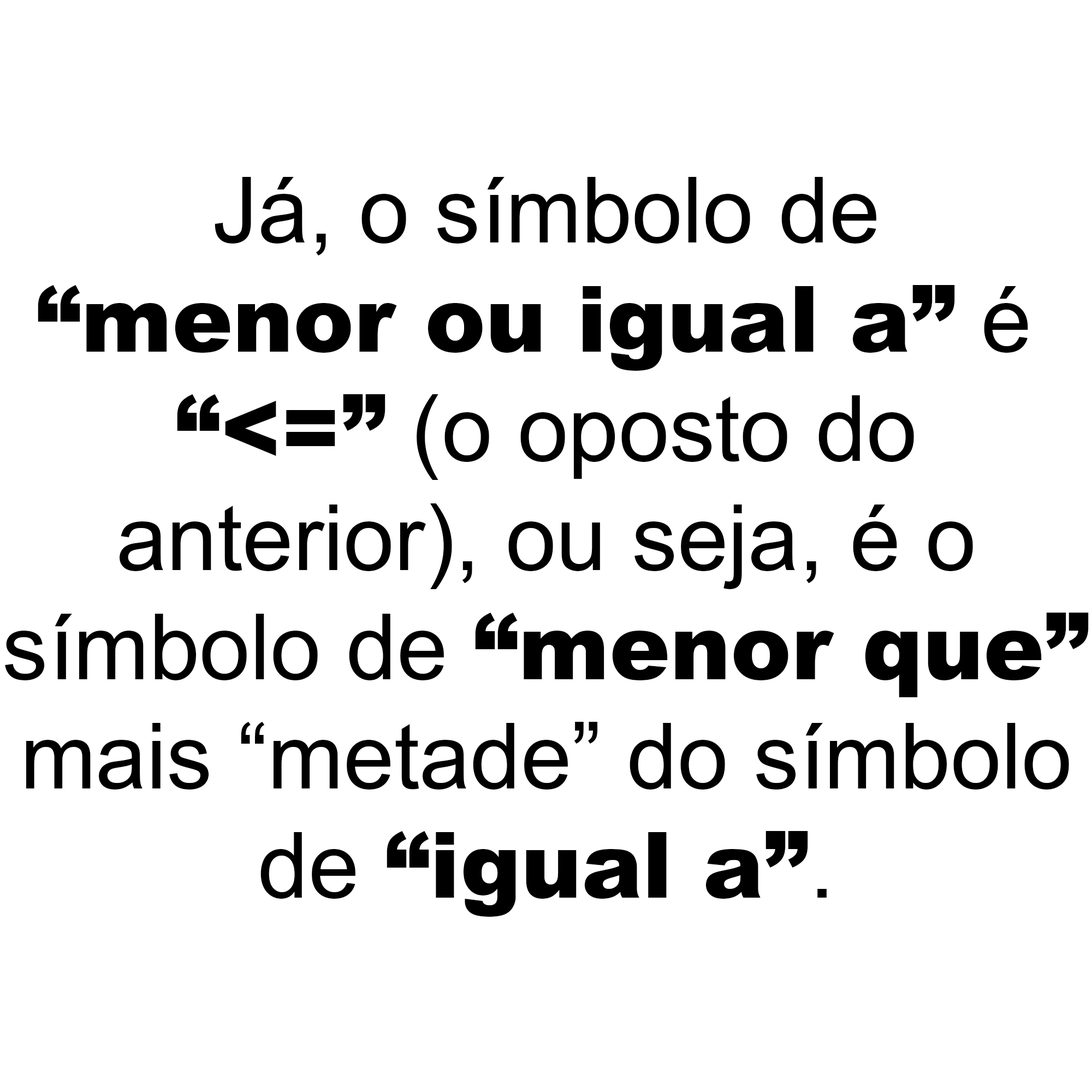
<style>
.page{position:relative;width:1092px;height:1092px;background:#ffffff}
.page>*{position:absolute;margin:0}
.t1{font:91px "ArialMT";color:#000000}
.t2{font:91px "Arial-Black";color:#000000}
</style>
<div class="page">
<p class="t1" style="left:5px;top:177px;width:1084px;height:740px;text-align:center">Já, o símbolo de<br><span class="t2">“menor ou igual a”</span> é <br><span class="t2">“&lt;=”</span> (o oposto do<br>anterior), ou seja, é o<br>símbolo de <span class="t2">“menor que”<br></span>mais “metade” do símbolo<br>de <span class="t2">“igual a”</span>.</p>
</div>
